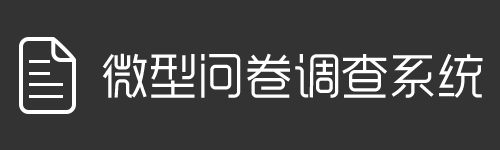
<style>
.page{position:relative;width:500px;height:150px;background:#333333}
.page>*{position:absolute;margin:0}
.t1{font:48px "RTWSYueGoTrial-Regular";color:#ffffff}
</style>
<div class="page">
<p class="t1" style="left:102px;top:53px;width:381px;height:45px">微型问卷调查系统</p>
</div>
